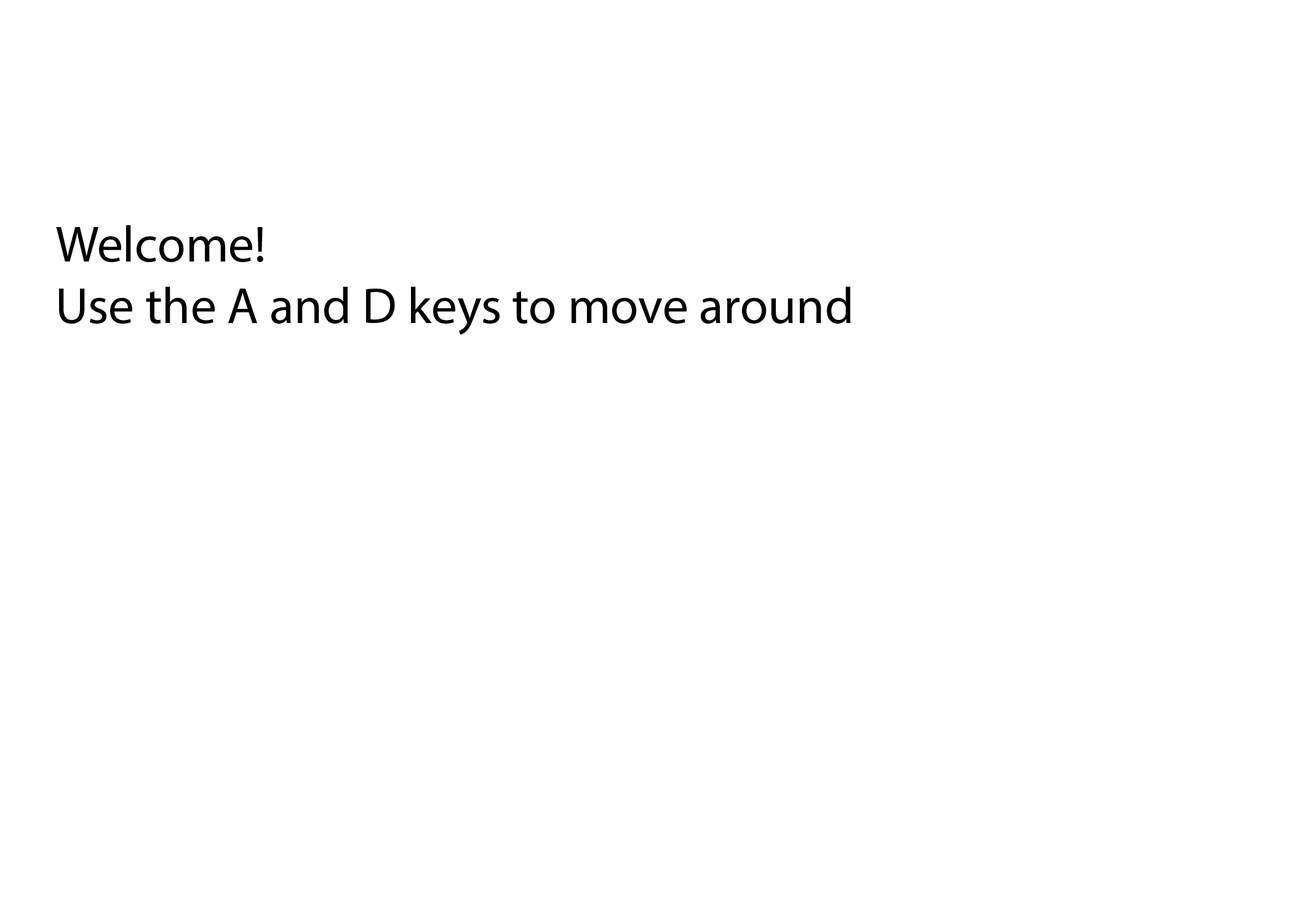
<style>
.page{position:relative;width:1292px;height:923px;background:#ffffff}
.page>*{position:absolute;margin:0}
.t1{font:51.3px "MyriadPro-Regular";color:#000000}
</style>
<div class="page">
<p class="t1" style="left:56px;top:225px;width:795px;height:110px">Welcome! <br>Use the A and D keys to move around</p>
</div>
